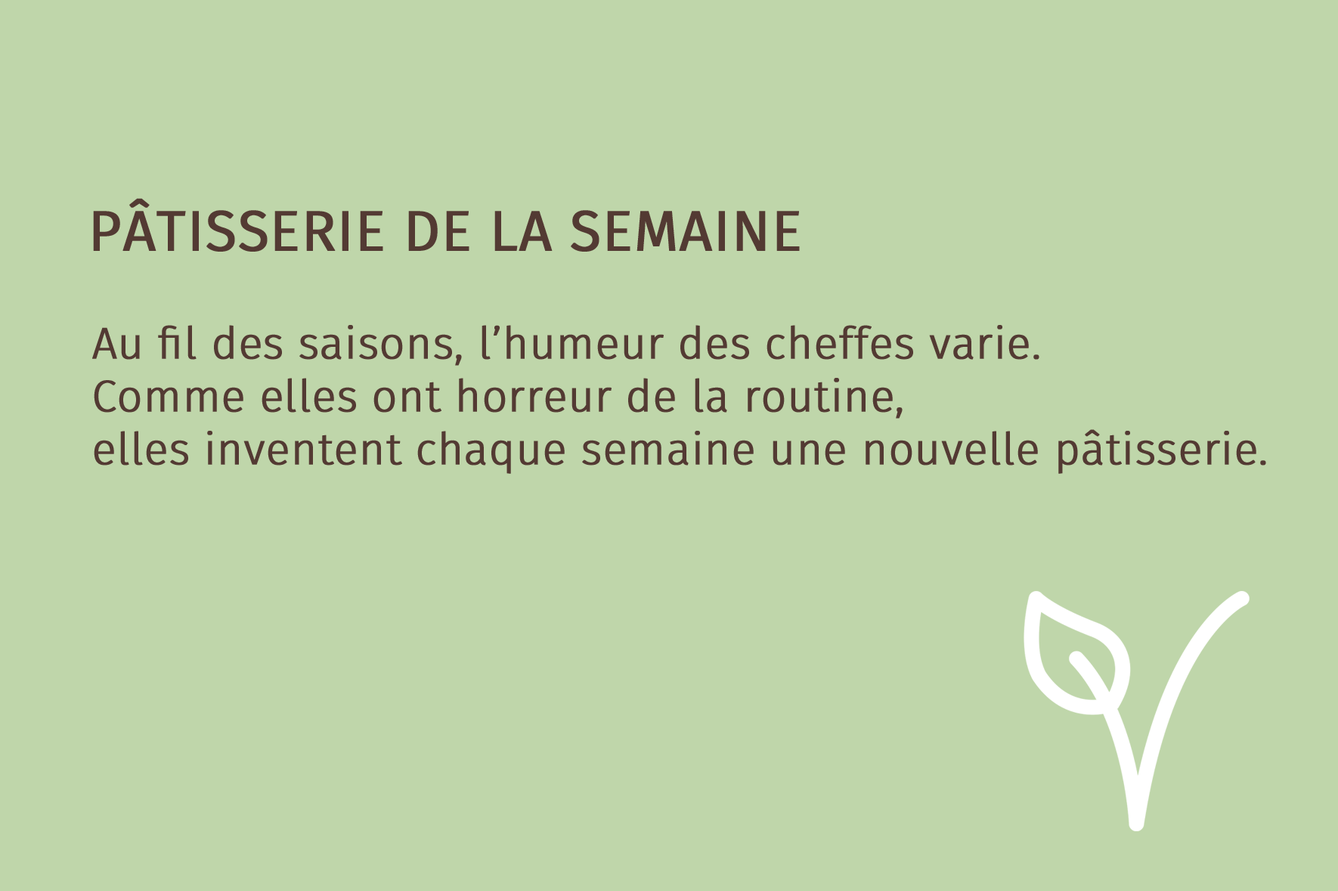
<style>
.page{position:relative;width:1338px;height:891px;background:#bfd6aa}
.page>*{position:absolute;margin:0}
.t1{font:56.7px "FiraSans-Book";color:#533a33;font-weight:bold}
.t2{font:44.1px "FiraSans-Light";color:#533a33;font-weight:bold}
</style>
<div class="page">
<p class="t1" style="left:93px;top:198px;width:707px;height:54px">PÂTISSERIE DE LA SEMAINE</p>
<p class="t2" style="left:92px;top:325px;width:1174px;height:149px">Au fil des saisons, l’humeur des cheffes varie.<br>Comme elles ont horreur de la routine,<br>elles inventent chaque semaine une nouvelle pâtisserie.</p>
</div>
